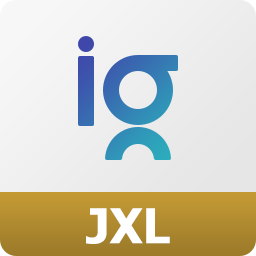
<style>
.page{position:relative;width:256px;height:256px}
.page>*{position:absolute;margin:0}
.t1{font:48px "Tahoma-Bold";color:#ffffff}
</style>
<div class="page">
<p class="t1" style="left:86px;top:208px;width:84px;height:36px">JXL</p>
</div>
